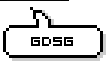
<style>
.page{position:relative;width:109px;height:69px;background:#ffffff}
.page>*{position:absolute;margin:0}
.t1{font:24px "VisitorTT2BRK";color:#000000;text-transform:uppercase}
</style>
<div class="page">
<p class="t1" style="left:31px;top:37px;width:42px;height:9px">gdsg</p>
</div>
